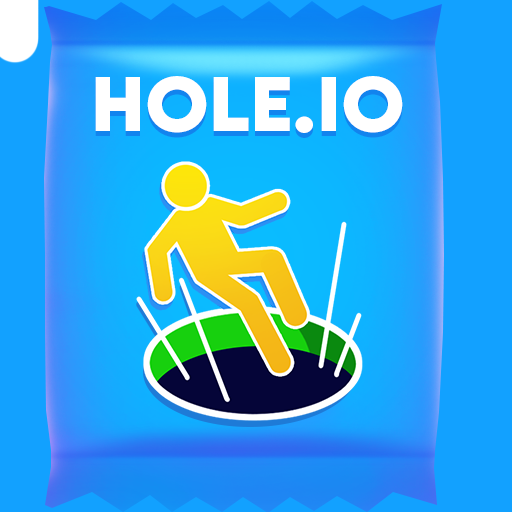
<style>
.page{position:relative;width:512px;height:512px;background:#12a1ff}
.page>*{position:absolute;margin:0}
.t1{font:68.2px "LEMONMILK-Bold";color:#ffffff}
</style>
<div class="page">
<p class="t1" style="left:95px;top:76px;width:308px;height:57px">HOLE.IO</p>
<p class="t1" style="left:95px;top:81px;width:308px;height:57px">HOLE.IO</p>
</div>
